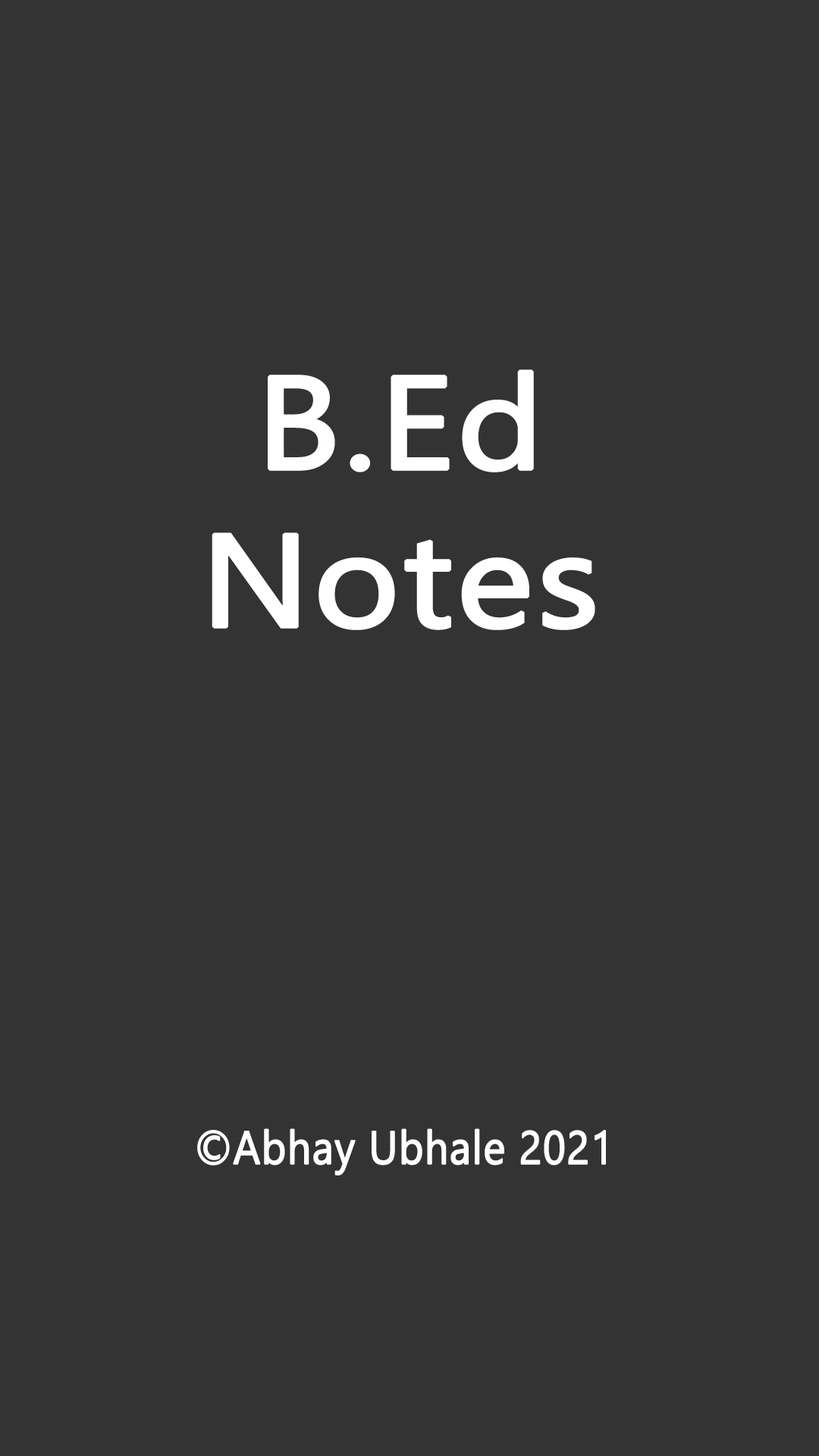
<style>
.page{position:relative;width:819px;height:1456px;background:#333333}
.page>*{position:absolute;margin:0}
.t1{font:131.5px "Gadugi";color:#ffffff;font-weight:bold;scale:1.11 1}
.t2{font:46.3px "Gadugi";color:#ffffff;font-weight:bold;scale:0.91 1}
</style>
<div class="page">
<p class="t1" style="left:212px;top:369px;width:383px;height:261px;text-align:center">B.Ed<br>Notes</p>
<p class="t2" style="left:197px;top:1128px;width:409px;height:47px">©Abhay Ubhale 2021</p>
</div>
